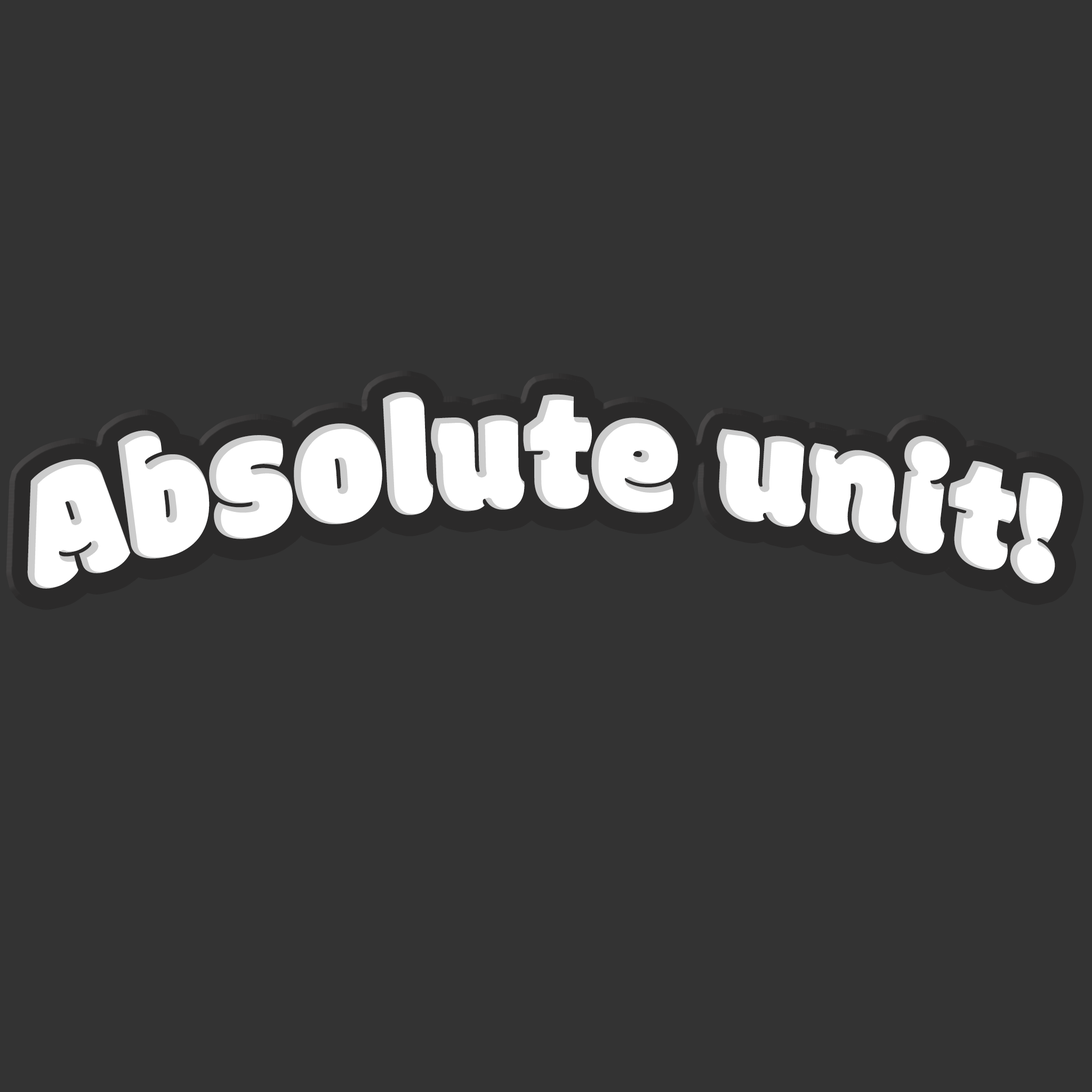
<style>
.page{position:relative;width:1092px;height:1092px;background:#333333}
.page>*{position:absolute;margin:0}
.t1{font:173.4px "Modak";color:#ffffff;scale:0.87 1}
</style>
<div class="page">
<p class="t1" style="left:27px;top:392px;width:1036px;height:197px">Absolute unit!</p>
</div>
